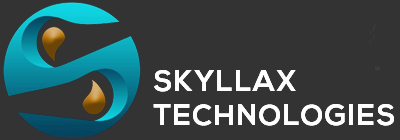
<style>
.page{position:relative;width:400px;height:140px;background:#333333}
.page>*{position:absolute;margin:0}
.t1{font:29px "NexaBold";letter-spacing:0.05em;color:#ffffff;text-transform:uppercase}
</style>
<div class="page">
<p class="t1" style="left:153px;top:70px;width:241px;height:56px">Skyllax <br>Technologies</p>
<p class="t1" style="left:153px;top:70px;width:241px;height:56px;opacity:0.6">Skyllax <br>Technologies</p>
<p class="t1" style="left:153px;top:70px;width:241px;height:56px">Skyllax <br>Technologies</p>
</div>
